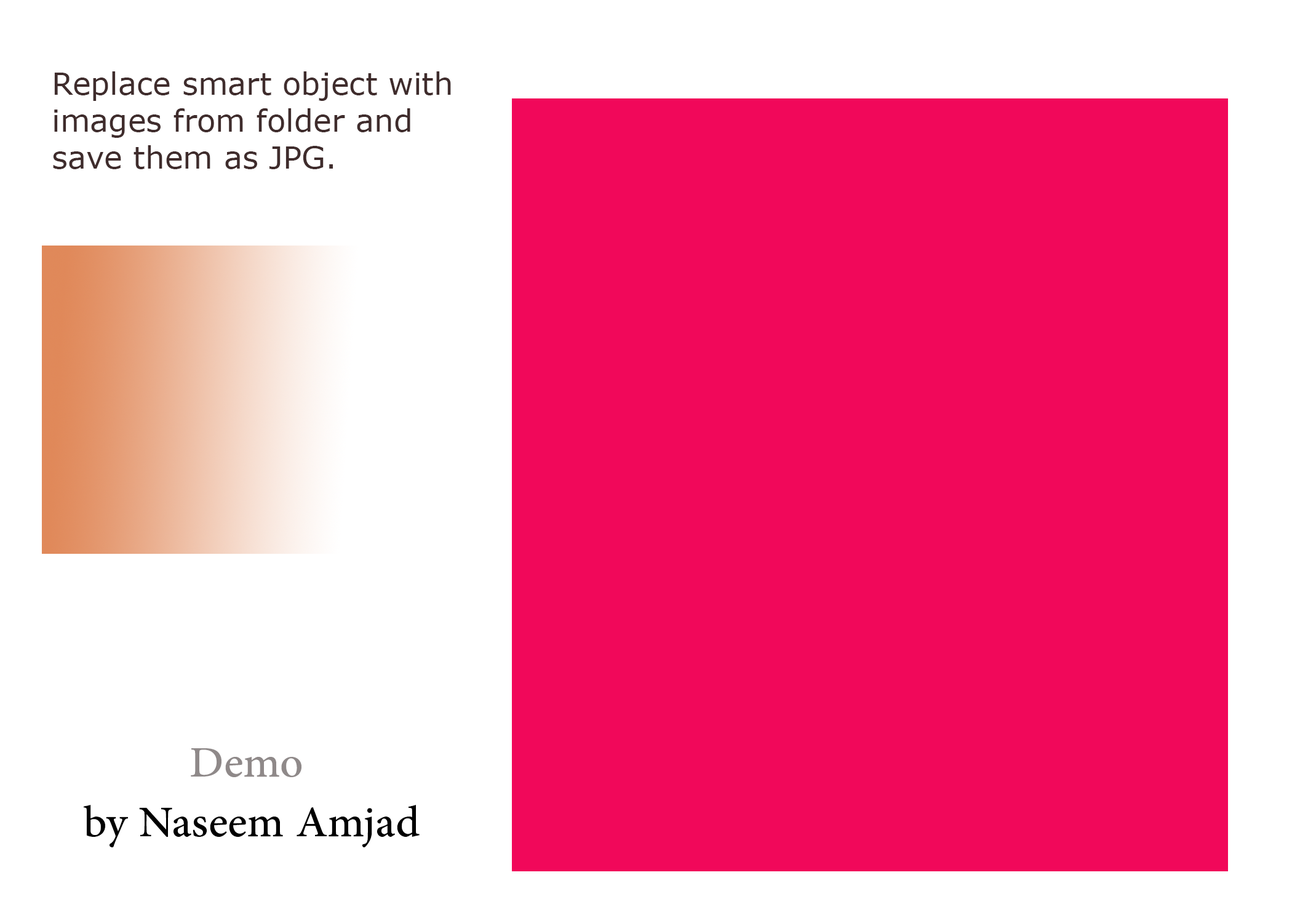
<style>
.page{position:relative;width:1292px;height:923px;background:#f1085a}
.page>*{position:absolute;margin:0}
.t1{font:30.8px "Verdana";color:#3f2c2c}
.t2{font:61.5px "AdobeArabic-Regular";color:#8f8989}
.t3{font:61.5px "AdobeArabic-Regular";color:#000000}
</style>
<div class="page">
<p class="t1" style="left:53px;top:71px;width:398px;height:98px">Replace smart object with images from folder and save them as JPG.</p>
<p class="t2" style="left:191px;top:748px;width:110px;height:29px">Demo</p>
<p class="t3" style="left:84px;top:805px;width:336px;height:42px">by Naseem Amjad</p>
</div>
